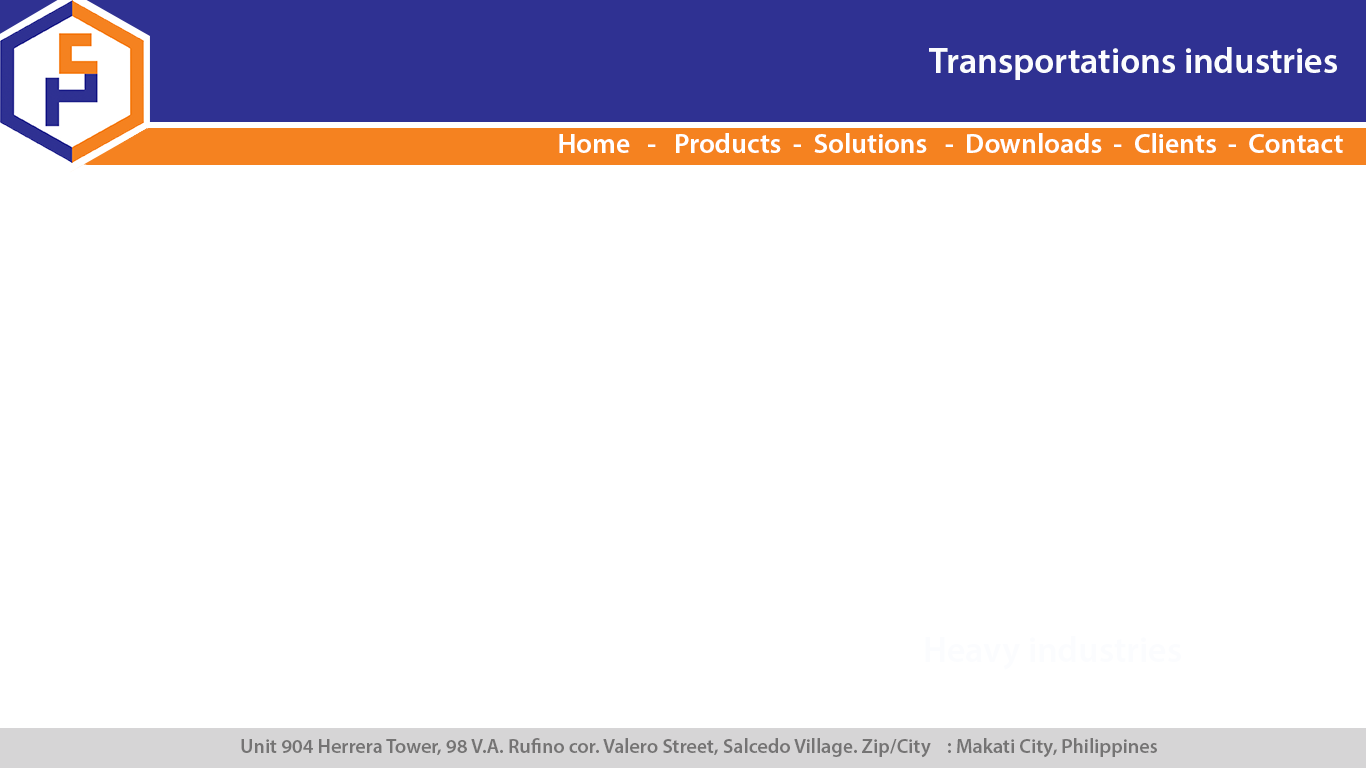
<style>
.page{position:relative;width:1366px;height:768px;background:#ffffff}
.page>*{position:absolute;margin:0}
.t1{font:36px "MyriadPro-Semibold";color:#fbfcfe}
.t2{font:28px "MyriadPro-Semibold";color:#ffffff}
.t3{font:20px "MyriadPro-Semibold";color:#757474}
</style>
<div class="page">
<p class="t1" style="left:929px;top:47px;width:408px;height:33px">Transportations industries</p>
<p class="t2" style="left:559px;top:133px;width:784px;height:20px">Home   -   Products  -  Solutions   -  Downloads  -  Clients  -  Contact</p>
<p class="t3" style="left:241px;top:738px;width:916px;height:20px">Unit 904 Herrera Tower, 98 V.A. Rufino cor. Valero Street, Salcedo Village. Zip/City    : Makati City, Philippines</p>
</div>
